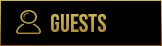
<style>
.page{position:relative;width:162px;height:46px;background:#000000}
.page>*{position:absolute;margin:0}
.t1{font:25px "BebasNeue-Regular";color:#c2a53a}
</style>
<div class="page">
<p class="t1" style="left:51px;top:14px;width:55px;height:18px">guests</p>
</div>
